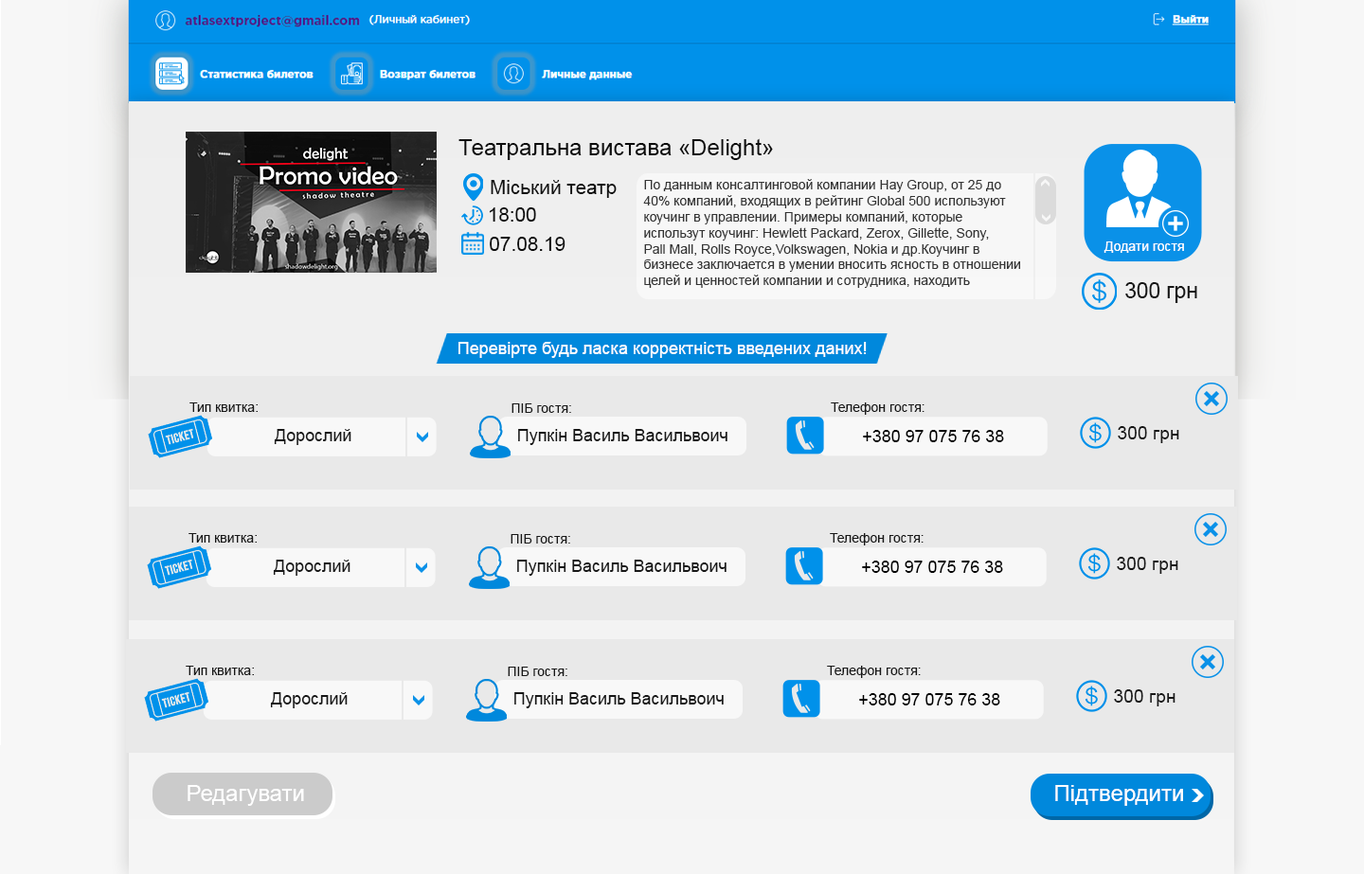
<style>
.page{position:relative;width:1364px;height:874px;background:#e9e9e9}
.page>*{position:absolute;margin:0}
.t1{font:22.7px "ArialMT";color:#0d0d0d}
.t2{font:19.5px "ArialMT";color:#0f0f0f}
.t3{font:13.3px "ArialMT";color:#343434}
.t4{font:19.5px "ArialMT";color:#0d0d0d}
.t5{font:13.3px "ArialMT";color:#ffffff}
.t6{font:21.7px "ArialMT";color:#171717}
.t7{font:17px "ArialMT";color:#ffffff}
.t8{font:13.3px "ArialMT";color:#171717}
.t9{font:17px "ArialMT";color:#171717}
.t10{font:17px "ArialMT";color:#000000}
.t11{font:18.4px "ArialMT";color:#171717}
.t12{font:22.7px "ArialMT";color:#ffffff}
</style>
<div class="page">
<p class="t1" style="left:458px;top:138px;width:315px;height:22px">Театральна вистава «Delight»</p>
<p class="t2" style="left:491px;top:180px;width:126px;height:18px">Міський театр</p>
<p class="t3" style="left:643px;top:179px;width:377px;height:109px">По данным консалтинговой компании Hay Group, от 25 до <br>40% компаний, входящих в рейтинг Global 500 используют <br>коучинг в управлении. Примеры компаний, которые <br>использут коучинг: Hewlett Packard, Zerox, Gillette, Sony, <br>Pall Mall, Rolls Royce,Volkswagen, Nokia и др.Коучинг в <br>бизнесе заключается в умении вносить ясность в отношении <br>целей и ценностей компании и сотрудника, находить</p>
<p class="t4" style="left:489px;top:207px;width:47px;height:15px">18:00</p>
<p class="t4" style="left:490px;top:237px;width:75px;height:14px">07.08.19</p>
<p class="t5" style="left:1103px;top:242px;width:81px;height:11px">Додати гостя</p>
<p class="t6" style="left:1125px;top:282px;width:72px;height:21px">300 грн</p>
<p class="t7" style="left:458px;top:342px;width:409px;height:16px">Перевірте будь ласка корректність введених даних!</p>
<p class="t8" style="left:189px;top:403px;width:69px;height:9px">Тип квитка:</p>
<p class="t8" style="left:511px;top:404px;width:60px;height:9px">ПІБ гостя:</p>
<p class="t8" style="left:831px;top:403px;width:93px;height:12px">Телефон гостя:</p>
<p class="t9" style="left:274px;top:429px;width:77px;height:16px">Дорослий</p>
<p class="t9" style="left:518px;top:429px;width:209px;height:16px">Пупкін Василь Васильвоич</p>
<p class="t10" style="left:863px;top:430px;width:141px;height:12px">+380 97 075 76 38</p>
<p class="t11" style="left:1118px;top:426px;width:61px;height:17px">300 грн</p>
<p class="t8" style="left:188px;top:533px;width:69px;height:10px">Тип квитка:</p>
<p class="t8" style="left:830px;top:533px;width:94px;height:13px">Телефон гостя:</p>
<p class="t8" style="left:511px;top:534px;width:59px;height:10px">ПІБ гостя:</p>
<p class="t11" style="left:1117px;top:557px;width:61px;height:17px">300 грн</p>
<p class="t9" style="left:273px;top:560px;width:77px;height:16px">Дорослий</p>
<p class="t9" style="left:517px;top:560px;width:209px;height:16px">Пупкін Василь Васильвоич</p>
<p class="t10" style="left:862px;top:561px;width:141px;height:12px">+380 97 075 76 38</p>
<p class="t8" style="left:186px;top:666px;width:68px;height:9px">Тип квитка:</p>
<p class="t8" style="left:827px;top:666px;width:94px;height:12px">Телефон гостя:</p>
<p class="t8" style="left:508px;top:667px;width:59px;height:9px">ПІБ гостя:</p>
<p class="t11" style="left:1114px;top:690px;width:61px;height:17px">300 грн</p>
<p class="t9" style="left:270px;top:692px;width:78px;height:16px">Дорослий</p>
<p class="t9" style="left:514px;top:692px;width:210px;height:16px">Пупкін Василь Васильвоич</p>
<p class="t10" style="left:859px;top:693px;width:141px;height:13px">+380 97 075 76 38</p>
<p class="t12" style="left:188px;top:785px;width:116px;height:21px">Редагувати</p>
<p class="t12" style="left:1055px;top:785px;width:128px;height:21px">Підтвердити</p>
</div>
